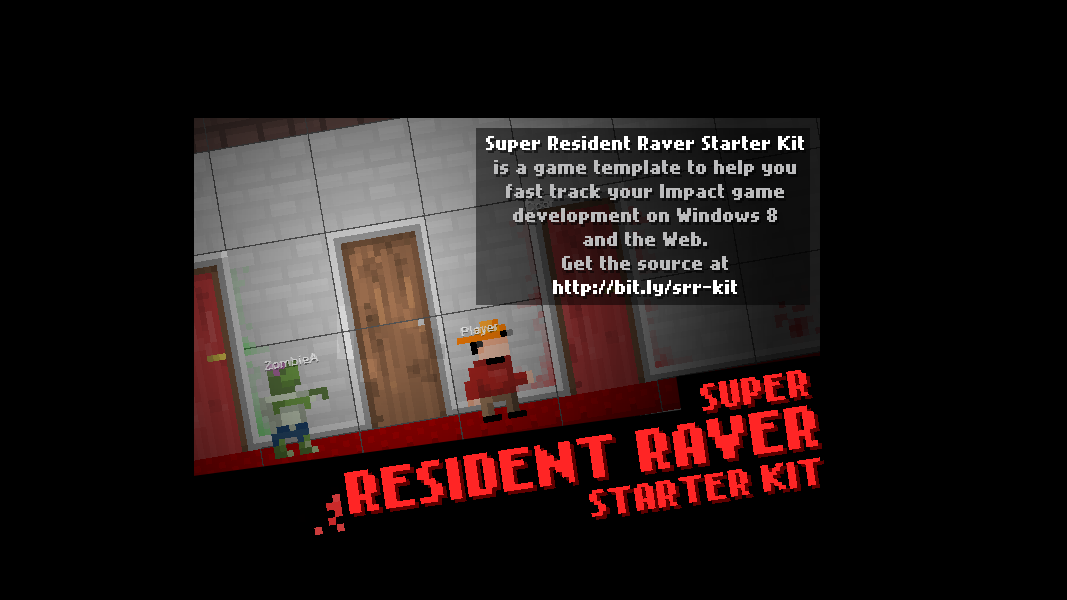
<style>
.page{position:relative;width:1067px;height:600px;background:#000000}
.page>*{position:absolute;margin:0}
.t1{font:16px/24px "NokiaCellphoneFC-Small";color:#bbbbbc}
.t2{font:16px/24px "NokiaCellphoneFC-Small";color:#ffffff}
.t3{font:30px "NokiaCellphoneFC-Small";color:#ff2525}
.t4{font:48px "NokiaCellphoneFC-Small";color:#ff2525}
.t5{font:36px "NokiaCellphoneFC-Small";color:#ff2525}
</style>
<div class="page">
<p class="t1" style="left:486px;top:136px;width:318px;height:160px;text-align:center"><span class="t2">Super Resident Raver Starter Kit </span>is a game template to help you fast track your Impact game development on Windows 8 <br>and the Web.<br>Get the source at<span class="t2"> http://bit.ly/srr-kit</span></p>
<p class="t3" style="left:700px;top:370px;width:109px;height:41px;rotate:-8deg">SUPER</p>
<p class="t4" style="left:344px;top:405px;width:474px;height:109px;rotate:-8deg"><span class="t5"><br></span>RESIDENT RAVER</p>
<p class="t3" style="left:589px;top:457px;width:231px;height:60px;rotate:-8deg">STARTER KIT</p>
</div>
